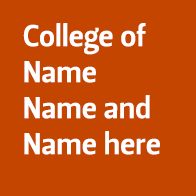
<style>
.page{position:relative;width:196px;height:196px;background:#c34500}
.page>*{position:absolute;margin:0}
.t1{font:30px "LeituraSans-Grot3";color:#ffffff}
</style>
<div class="page">
<p class="t1" style="left:23px;top:23px;width:137px;height:132px">College of <br>Name<br>Name and<br>Name here</p>
</div>
